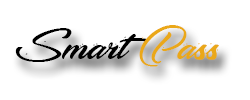
<style>
.page{position:relative;width:250px;height:100px;background:#ffffff}
.page>*{position:absolute;margin:0}
.t1{font:40px "Making-the-Quality";color:#000000}
.t2{font:40px "Making-the-Quality";color:#eaa819}
</style>
<div class="page">
<p class="t1" style="left:15px;top:25px;width:204px;height:42px">Smart <span class="t2">Pass</span></p>
</div>
